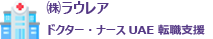
<style>
.page{position:relative;width:213px;height:39px;background:#ffffff}
.page>*{position:absolute;margin:0}
.t1{font:11px/24px "MeiryoUI-Bold";color:#563a86;scale:1.06 1}
.t2{font:14px/24px "MeiryoUI-Bold";color:#563a86;scale:1.06 1}
</style>
<div class="page">
<p class="t1" style="left:46px;top:1px;width:159px;height:34px"><span class="t2">㈱ラウレア<br></span>ドクター・ナースUAE 転職支援</p>
</div>
